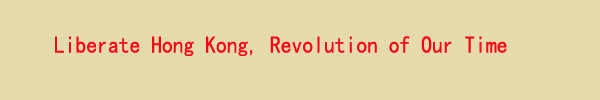
<style>
.page{position:relative;width:600px;height:100px;background:#e6dbad}
.page>*{position:absolute;margin:0}
.t1{font:24px "SimHei";color:#ff0016;scale:0.9 1}
</style>
<div class="page">
<p class="t1" style="left:55px;top:36px;width:452px;height:20px">Liberate Hong Kong, Revolution of Our Time</p>
</div>
